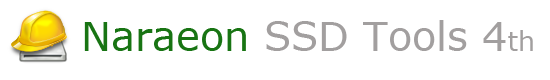
<style>
.page{position:relative;width:550px;height:80px;background:#ffffff}
.page>*{position:absolute;margin:0}
.t1{font:40px "Verdana";color:#a29f9f}
.t2{font:40px "Verdana";color:#187413}
.t3{font:26.7px "Verdana";color:#a29f9f}
</style>
<div class="page">
<p class="t1" style="left:84px;top:20px;width:449px;height:31px"><span class="t2">Naraeon</span> SSD Tools 4<span class="t3">th</span></p>
</div>
